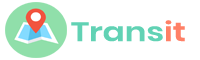
<style>
.page{position:relative;width:200px;height:60px;background:#ffffff}
.page>*{position:absolute;margin:0}
.t1{font:26.3px "Poppins-SemiBold";color:#61d2b4;scale:1.24 1}
.t2{font:26.3px "Poppins-SemiBold";color:#ff8066;scale:1.24 1}
</style>
<div class="page">
<p class="t1" style="left:71px;top:20px;width:114px;height:22px">Trans<span class="t2">it</span></p>
</div>
